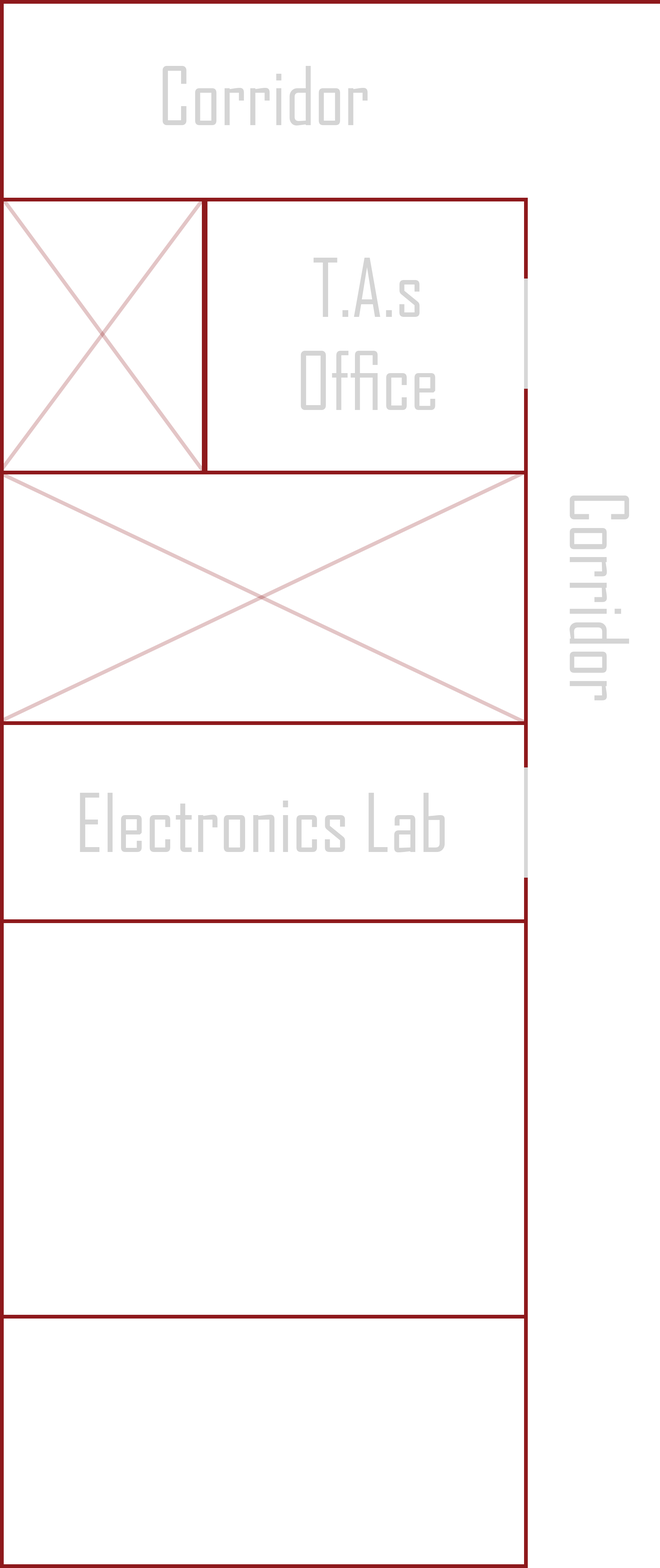
<style>
.page{position:relative;width:660px;height:1568px;background:#ffffff}
.page>*{position:absolute;margin:0}
.t1{font:77.6px "AgencyFB-Reg";color:#d4d4d4}
</style>
<div class="page">
<p class="t1" style="left:162px;top:66px;width:206px;height:59px">Corridor</p>
<p class="t1" style="left:300px;top:258px;width:135px;height:152px;text-align:center">T.A.s<br>Office</p>
<p class="t1" style="left:569px;top:495px;width:60px;height:205px;rotate:90deg">Corridor</p>
<p class="t1" style="left:80px;top:793px;width:365px;height:59px">Electronics Lab</p>
</div>
